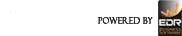
<style>
.page{position:relative;width:182px;height:36px;background:#ffffff}
.page>*{position:absolute;margin:0}
.t1{font:9px "FelixTitlingMT";color:#1f1a17;font-weight:bold;scale:0.89 1}
</style>
<div class="page">
<p class="t1" style="left:98px;top:17px;width:55px;height:7px">Powered By</p>
</div>
